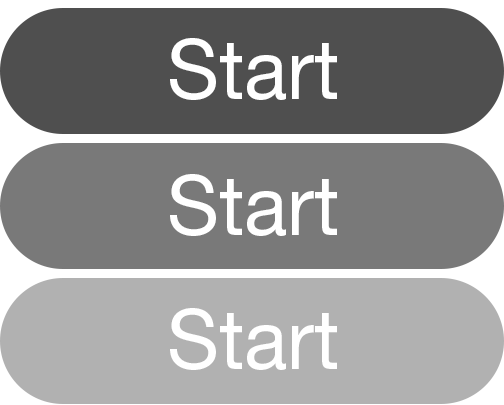
<style>
.page{position:relative;width:504px;height:405px;background:#4f4f4f}
.page>*{position:absolute;margin:0}
.t1{font:84px "HelveticaNeueLTPro-Roman";color:#ffffff;scale:0.96 1}
</style>
<div class="page">
<p class="t1" style="left:170px;top:38px;width:167px;height:62px">Start</p>
<p class="t1" style="left:170px;top:174px;width:167px;height:62px">Start</p>
<p class="t1" style="left:170px;top:308px;width:167px;height:62px">Start</p>
</div>
